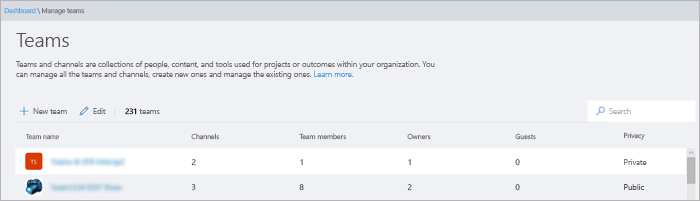
<style>
.page{position:relative;width:700px;height:201px;background:#f0f1f5}
.page>*{position:absolute;margin:0}
.t1{font:6.7px "SegoeUI-Semilight";color:#757575}
.t2{font:6.7px "SegoeUI-Semilight";color:#5ea6d8}
.t3{font:20px "SegoeUI-Semilight";color:#505050}
.t4{font:7.8px/10.7px "SegoeUI-Semilight";color:#757575}
.t5{font:7.8px/10.7px "SegoeUI-Semilight";color:#5ea6d8}
.t6{font:7.7px "SegoeUI-Semilight";color:#757575}
.t7{font:7.7px "SegoeUI";color:#222222}
.t8{font:7.7px "SegoeUI-Semilight";color:#b4b4b4}
.t9{font:7.1px "SegoeUI-Semilight";color:#757575}
.t10{font:8px "SegoeUI"}
.t11{font:8px "SegoeUI-Semilight";color:#757575}
.t12{font:8px "SegoeUI-Semilight";color:#505050}
</style>
<div class="page">
<p class="t1" style="left:4px;top:7px;width:81px;height:8px"><span class="t2">Dashboard </span>\ Manage teams</p>
<p class="t3" style="left:16px;top:33px;width:53px;height:14px">Teams</p>
<p class="t4" style="left:16px;top:61px;width:419px;height:18px">Teams and channels are collections of people, content, and tools used for projects or outcomes within your organization. You<br>can manage all the teams and channels, create new ones and manage the existing ones. <span class="t5">Learn more.</span></p>
<p class="t6" style="left:33px;top:108px;width:34px;height:6px">New team</p>
<p class="t6" style="left:93px;top:108px;width:13px;height:6px">Edit</p>
<p class="t6" style="left:125px;top:108px;width:35px;height:7px"><span class="t7">231</span> teams</p>
<p class="t8" style="left:609px;top:108px;width:22px;height:6px">Search</p>
<p class="t1" style="left:26px;top:134px;width:33px;height:6px">Team name</p>
<p class="t9" style="left:191px;top:133px;width:28px;height:7px">Channels</p>
<p class="t9" style="left:299px;top:133px;width:47px;height:7px">Team members</p>
<p class="t9" style="left:407px;top:133px;width:24px;height:7px">Owners</p>
<p class="t9" style="left:515px;top:133px;width:21px;height:7px">Guests</p>
<p class="t9" style="left:624px;top:132px;width:21px;height:8px">Privacy</p>
<p class="t10" style="left:191px;top:159px;width:5px;height:7px">2</p>
<p class="t10" style="left:300px;top:159px;width:3px;height:7px">1</p>
<p class="t10" style="left:408px;top:159px;width:3px;height:7px">1</p>
<p class="t10" style="left:515px;top:159px;width:5px;height:7px">0</p>
<p class="t11" style="left:624px;top:159px;width:23px;height:6px">Private</p>
<p class="t10" style="left:191px;top:184px;width:5px;height:7px">3</p>
<p class="t10" style="left:299px;top:184px;width:5px;height:7px">8</p>
<p class="t10" style="left:407px;top:184px;width:5px;height:7px">2</p>
<p class="t10" style="left:515px;top:184px;width:5px;height:7px">0</p>
<p class="t12" style="left:624px;top:184px;width:20px;height:6px">Public</p>
</div>
